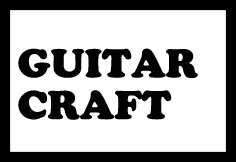
<style>
.page{position:relative;width:236px;height:162px;background:#ffffff}
.page>*{position:absolute;margin:0}
.t1{font:41.7px/41.7px "CooperBlack";color:#000204;text-transform:uppercase}
</style>
<div class="page">
<p class="t1" style="left:18px;top:48px;width:180px;height:72px">Guitar<br>Craft</p>
</div>
